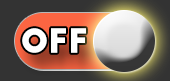
<style>
.page{position:relative;width:170px;height:81px;background:#333333}
.page>*{position:absolute;margin:0}
.t1{font:32.7px "BigJohn";color:#ffffff}
</style>
<div class="page">
<p class="t1" style="left:22px;top:28px;width:64px;height:25px">OFF</p>
</div>
